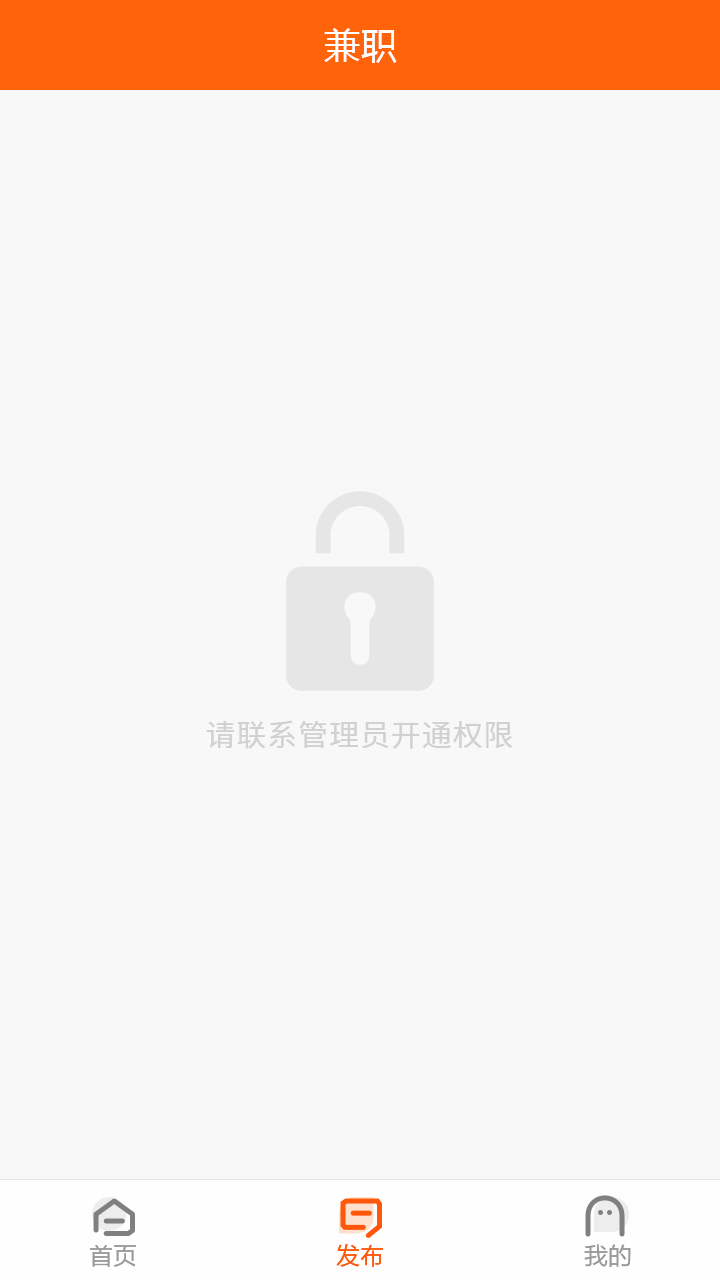
<style>
.page{position:relative;width:720px;height:1280px;background:#f8f8f8}
.page>*{position:absolute;margin:0}
.t1{font:36px "MicrosoftYaHei";letter-spacing:0.03em;color:#ffffff}
.t2{font:30px "NotoSansCJKsc-Regular";letter-spacing:0.03em;color:#d1d1d1;font-variant:small-caps}
.t3{font:24px "FZLTHJW--GB1-0";color:#999999}
.t4{font:24px "FZLTHJW--GB1-0";color:#ff580a}
</style>
<div class="page">
<p class="t1" style="left:324px;top:28px;width:73px;height:35px">兼职</p>
<p class="t2" style="left:206px;top:720px;width:307px;height:29px">请联系管理员开通权限</p>
<p class="t3" style="left:90px;top:1244px;width:46px;height:23px">首页</p>
<p class="t4" style="left:336px;top:1244px;width:47px;height:23px">发布</p>
<p class="t3" style="left:584px;top:1244px;width:47px;height:23px">我的</p>
</div>
